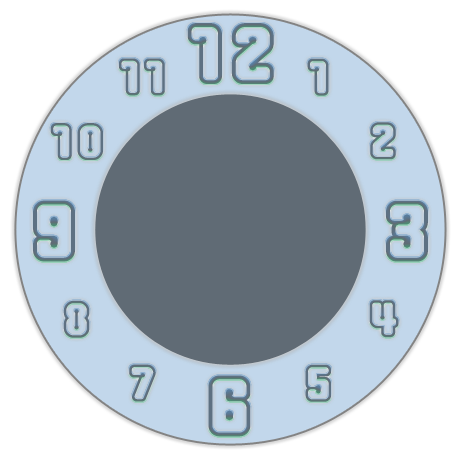
<style>
.page{position:relative;width:460px;height:460px;background:#ffffff}
.page>*{position:absolute;margin:0}
.t1{font:73px "ClipeOpen";color:#5d7180}
.t2{font:44.2px "ClipeOpen";color:#5e7180}
.t3{font:44.2px "ClipeOpen";color:#5e7182}
.t4{font:44.2px "ClipeOpen";color:#5e7181}
.t5{font:44.2px "ClipeOpen";color:#5e7177}
.t6{font:73px "ClipeOpen";color:#5d7182}
.t7{font:44.2px "ClipeOpen";color:#5e717f}
.t8{font:44.2px "ClipeOpen";color:#5e717a}
.t9{font:44.2px "ClipeOpen";color:#5d717c}
</style>
<div class="page">
<p class="t1" style="left:187px;top:23px;width:87px;height:61px">12</p>
<p class="t2" style="left:119px;top:58px;width:46px;height:38px">11</p>
<p class="t3" style="left:307px;top:58px;width:22px;height:38px">1</p>
<p class="t4" style="left:50px;top:123px;width:53px;height:37px">10</p>
<p class="t5" style="left:370px;top:122px;width:26px;height:38px">2</p>
<p class="t6" style="left:33px;top:200px;width:42px;height:62px">9</p>
<p class="t1" style="left:386px;top:200px;width:42px;height:62px">3</p>
<p class="t7" style="left:63px;top:300px;width:27px;height:38px">8</p>
<p class="t7" style="left:369px;top:300px;width:30px;height:38px">4</p>
<p class="t8" style="left:129px;top:364px;width:27px;height:38px">7</p>
<p class="t9" style="left:305px;top:364px;width:26px;height:38px">5</p>
<p class="t6" style="left:208px;top:375px;width:43px;height:62px">6</p>
</div>
